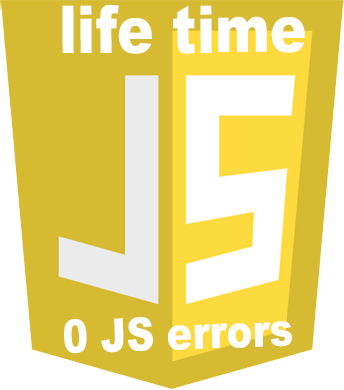
<style>
.page{position:relative;width:344px;height:390px;background:#d6ba32}
.page>*{position:absolute;margin:0}
.t1{font:66px "Arial-Black";color:#ffffff;scale:0.83 1}
.t2{font:46px "Arial-Black";color:#ffffff;scale:0.83 1}
</style>
<div class="page">
<p class="t1" style="left:62px;top:4px;width:243px;height:50px">life time</p>
<p class="t2" style="left:64px;top:317px;width:228px;height:37px;rotate:-2deg">0 JS errors</p>
</div>
